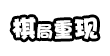
<style>
.page{position:relative;width:110px;height:56px;background:#ffffff}
.page>*{position:absolute;margin:0}
.t1{font:25px "DFPHaiBaoW12";letter-spacing:-0.005em;color:#ffffff}
.t2{font:16.7px "DFPHaiBaoW12";letter-spacing:-0.005em;color:#ffffff}
.t3{font:20.8px "DFPHaiBaoW12";letter-spacing:-0.005em;color:#ffffff}
</style>
<div class="page">
<p class="t1" style="left:12px;top:17px;width:86px;height:23px">棋<span class="t2">局</span><span class="t3">重</span>现</p>
</div>
